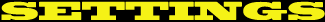
<style>
.page{position:relative;width:325px;height:22px;background:#f5f216}
.page>*{position:absolute;margin:0}
.t1{font:24px "BlackoakStd";color:#f5f216}
</style>
<div class="page">
<p class="t1" style="left:1px;top:1px;width:324px;height:19px">SETTINGS</p>
</div>
